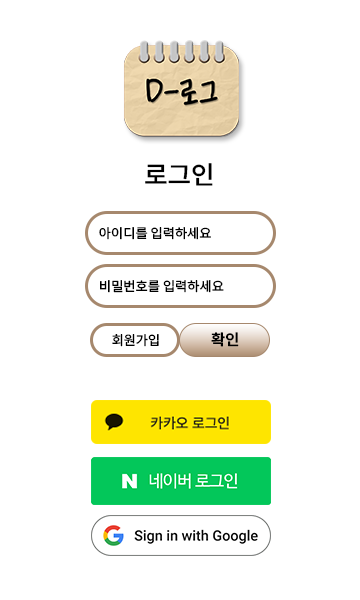
<style>
.page{position:relative;width:360px;height:600px;background:#ffffff}
.page>*{position:absolute;margin:0}
.t1{font:25px "NotoSansKR-Medium";color:#000000}
.t2{font:13px "NotoSansKR-Regular";color:#000000}
.t3{font:15px "NotoSansKR-Medium";color:#000000}
</style>
<div class="page">
<p class="t1" style="left:145px;top:163px;width:68px;height:23px">로그인</p>
<p class="t2" style="left:99px;top:227px;width:112px;height:13px">아이디를 입력하세요</p>
<p class="t2" style="left:100px;top:280px;width:124px;height:13px">비밀번호를 입력하세요</p>
<p class="t2" style="left:112px;top:334px;width:47px;height:13px">회원가입</p>
<p class="t3" style="left:211px;top:332px;width:28px;height:15px">확인</p>
</div>
